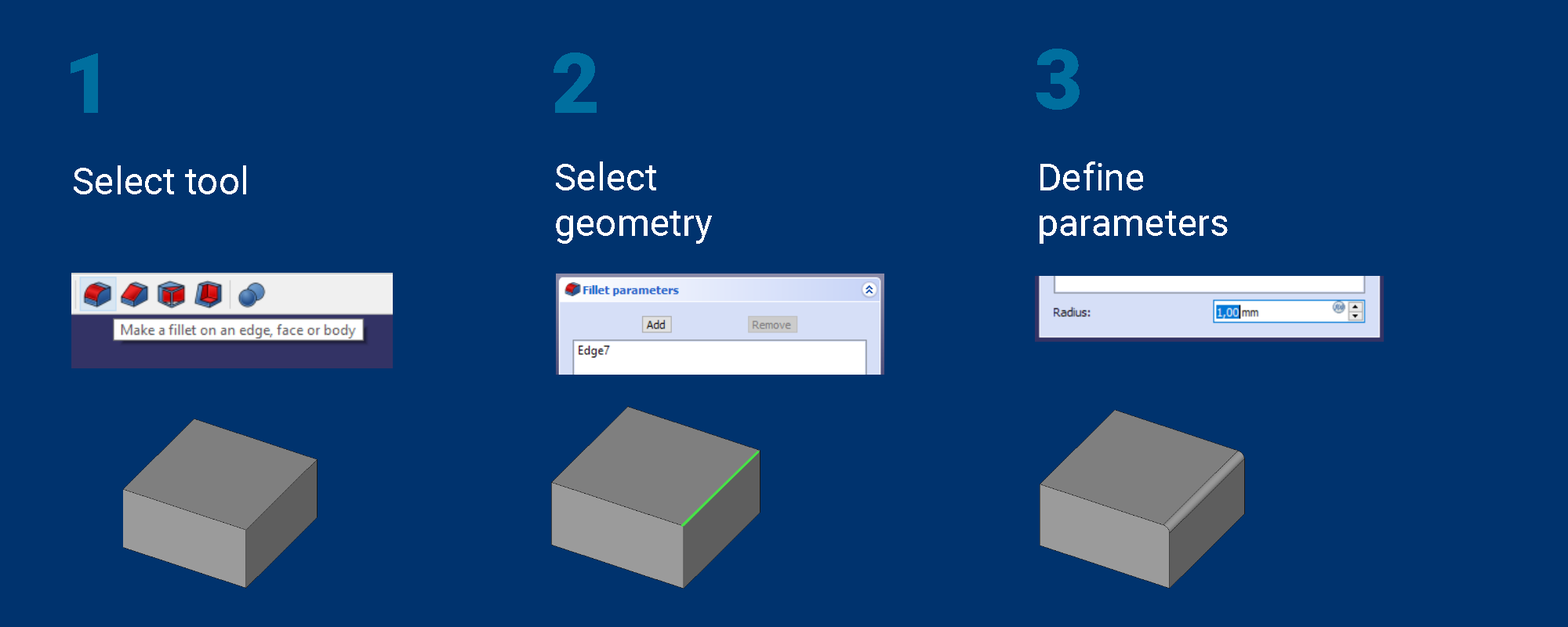
<style>
.page{position:relative;width:1568px;height:627px;background:#00336e}
.page>*{position:absolute;margin:0}
.t1{font:83.6px "Roboto-Black";color:#006f9f}
.t2{font:37.6px "Roboto-Regular";color:#ffffff}
</style>
<div class="page">
<p class="t1" style="left:71px;top:53px;width:27px;height:60px">1</p>
<p class="t1" style="left:554px;top:53px;width:43px;height:60px">2</p>
<p class="t1" style="left:1036px;top:49px;width:44px;height:61px">3</p>
<p class="t2" style="left:556px;top:162px;width:156px;height:82px">Select <br>geometry</p>
<p class="t2" style="left:1040px;top:162px;width:188px;height:82px">Define <br>parameters</p>
<p class="t2" style="left:74px;top:165px;width:172px;height:29px">Select tool</p>
</div>
